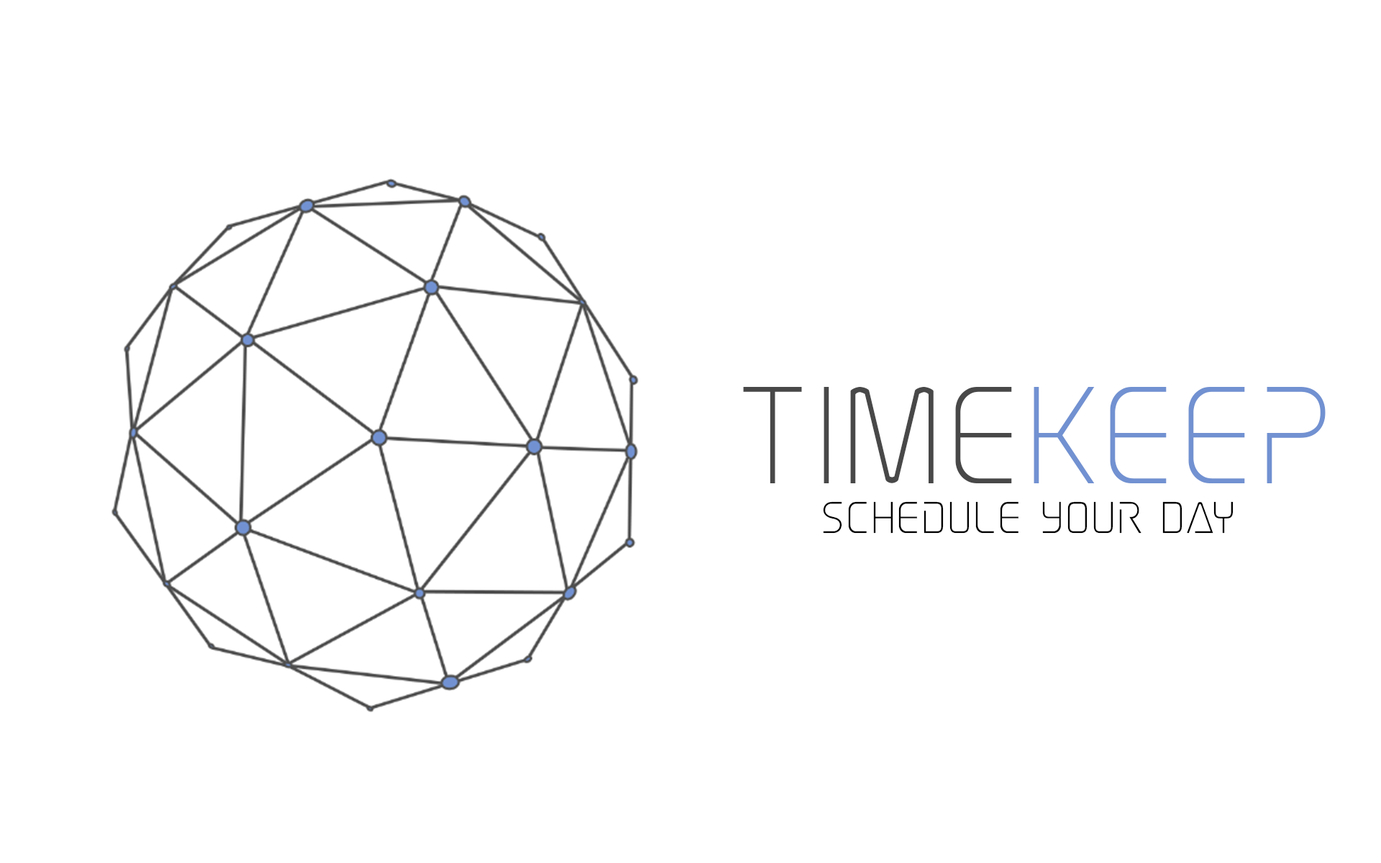
<style>
.page{position:relative;width:1381px;height:863px;background:#ffffff}
.page>*{position:absolute;margin:0}
.t1{font:179.9px "EliteDanger";color:#484848}
.t2{font:179.9px "EliteDanger";color:#7191d1}
.t3{font:57.6px "EliteDanger";color:#000000}
</style>
<div class="page">
<p class="t1" style="left:743px;top:387px;width:583px;height:96px">time<span class="t2">keep</span></p>
<p class="t3" style="left:823px;top:501px;width:411px;height:33px">Schedule Your Day</p>
</div>
